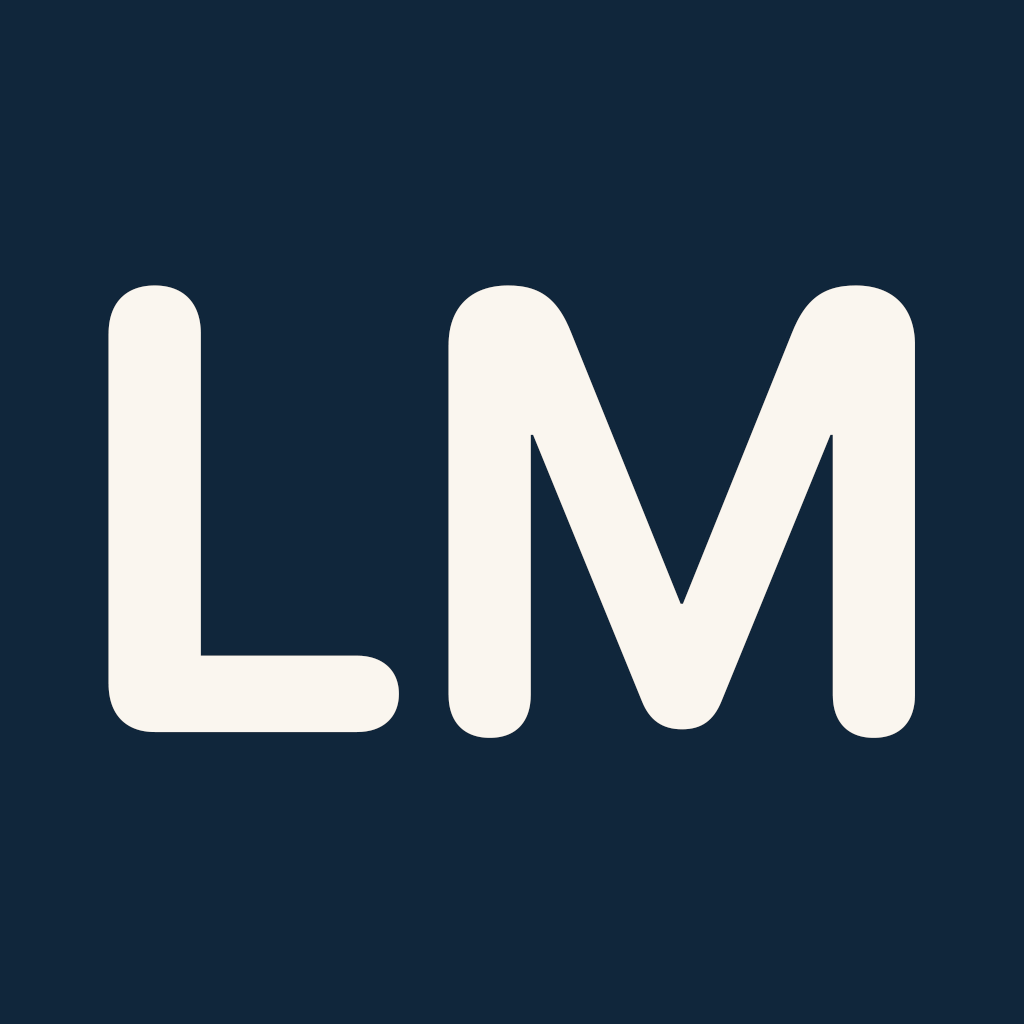
<style>
.page{position:relative;width:1024px;height:1024px;background:#10263b}
.page>*{position:absolute;margin:0}
.t1{font:625px "SFProRounded-Bold";color:#faf6ef}
</style>
<div class="page">
<p class="t1" style="left:108px;top:285px;width:807px;height:453px">LM</p>
</div>
